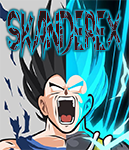
<style>
.page{position:relative;width:129px;height:150px}
.page>*{position:absolute;margin:0}
.t1{font:53.6px "Hellion-Roots";scale:0.4 1}
</style>
<div class="page">
<p class="t1" style="left:7px;top:10px;width:114px;height:48px">Skanderex</p>
</div>
